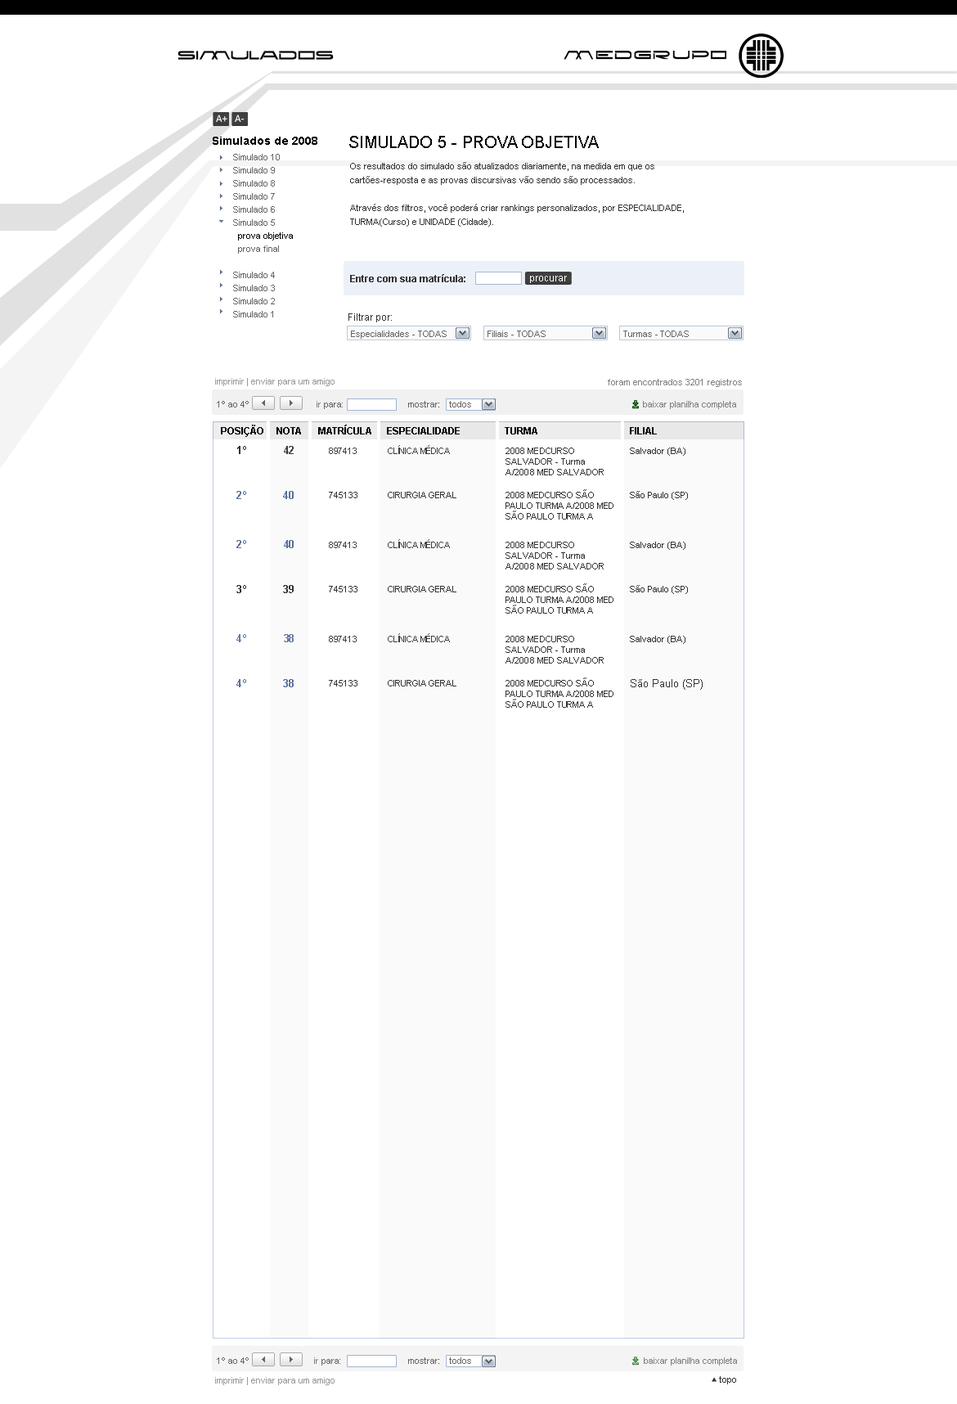
<style>
.page{position:relative;width:957px;height:1404px;background:#ffffff}
.page>*{position:absolute;margin:0}
.t1{font:14.7px "NewBrilliant";color:#000000;font-weight:bold;scale:0.77 1}
.t2{font:10.6px "Calibri";color:#ffffff}
.t3{font:11.5px "Arial-BoldMT";color:#000000}
.t4{font:16.4px "ArialMT";color:#000000}
.t5{font:9px/13.1px "ArialMT";color:#666666}
.t6{font:9px/13.1px "ArialMT";color:#010101}
.t7{font:9px/13.8px "ArialMT";color:#333333}
.t8{font:9.8px "Arial-BoldMT";color:#333333}
.t9{font:9.8px "ArialMT";color:#ffffff}
.t10{font:9.8px "ArialMT";color:#333333}
.t11{font:9px "ArialMT";color:#666666}
.t12{font:9px "ArialMT";color:#999999}
.t13{font:9px "ArialMT";color:#7f7f7f}
.t14{font:9px "ArialMT";color:#333333}
.t15{font:9.8px "Arial-BoldMT";color:#000000}
.t16{font:10.6px "Arial-BoldMT";letter-spacing:-0.02em;color:#333333}
.t17{font:10.6px "Arial-BoldMT";letter-spacing:-0.02em;color:#3e3e3e}
.t18{font:9px "ArialMT";letter-spacing:-0.02em;color:#3e3e3e}
.t19{font:9px/10.6px "ArialMT";color:#333333}
.t20{font:10.6px "Arial-BoldMT";letter-spacing:-0.02em;color:#5b709d}
.t21{font:10.6px "Arial-BoldMT";color:#5b709d}
.t22{font:10.6px "Arial-BoldMT";color:#333333}
.t23{font:10.6px "Arial-BoldMT";letter-spacing:-0.02em;color:#6579a3}
.t24{font:10.6px "ArialMT";color:#333333}
</style>
<div class="page">
<p class="t1" style="left:178px;top:51px;width:156px;height:9px">SIMULADOS</p>
<p class="t2" style="left:216px;top:115px;width:11px;height:7px">A+</p>
<p class="t2" style="left:235px;top:115px;width:9px;height:7px">A-</p>
<p class="t3" style="left:213px;top:137px;width:104px;height:8px">Simulados de 2008</p>
<p class="t4" style="left:349px;top:136px;width:250px;height:12px">SIMULADO 5 - PROVA OBJETIVA</p>
<p class="t5" style="left:233px;top:154px;width:60px;height:163px">Simulado 10<br>Simulado 9<br>Simulado 8<br>Simulado 7<br>Simulado 6<br>Simulado 5<br> <span class="t6"> prova objetiva<br></span>  prova final<br><br>Simulado 4<br>Simulado 3 <br>Simulado 2<br>Simulado 1</p>
<p class="t7" style="left:350px;top:162px;width:334px;height:65px">Os resultados do simulado são atualizados diariamente, na medida em que os <br>cartões-resposta e as provas discursivas vão sendo são processados. <br><br>Através dos filtros, você poderá criar rankings personalizados, por ESPECIALIDADE, <br>TURMA(Curso) e UNIDADE (Cidade).</p>
<p class="t8" style="left:350px;top:274px;width:116px;height:8px">Entre com sua matrícula:</p>
<p class="t9" style="left:530px;top:276px;width:37px;height:7px">procurar</p>
<p class="t10" style="left:349px;top:313px;width:43px;height:9px">Filtrar por:</p>
<p class="t11" style="left:351px;top:331px;width:96px;height:8px">Especialidades - TODAS</p>
<p class="t11" style="left:488px;top:331px;width:58px;height:6px">Filiais - TODAS</p>
<p class="t11" style="left:623px;top:331px;width:66px;height:6px">Turmas - TODAS</p>
<p class="t12" style="left:215px;top:378px;width:120px;height:8px">imprimir | enviar para um amigo</p>
<p class="t13" style="left:608px;top:379px;width:134px;height:8px">foram encontrados 3201 registros</p>
<p class="t11" style="left:217px;top:401px;width:32px;height:6px">1º ao 4º</p>
<p class="t11" style="left:317px;top:401px;width:26px;height:8px"><span class="t13">ir</span> para:</p>
<p class="t11" style="left:408px;top:401px;width:31px;height:6px">mostrar<span class="t14">:</span></p>
<p class="t11" style="left:449px;top:401px;width:22px;height:6px">todos</p>
<p class="t13" style="left:643px;top:401px;width:93px;height:8px">baixar planilha completa</p>
<p class="t15" style="left:221px;top:425px;width:42px;height:12px">POSIÇÃO</p>
<p class="t15" style="left:318px;top:425px;width:53px;height:9px">MATRÍCULA</p>
<p class="t15" style="left:277px;top:427px;width:24px;height:7px">NOTA</p>
<p class="t15" style="left:387px;top:427px;width:73px;height:7px">ESPECIALIDADE</p>
<p class="t15" style="left:505px;top:427px;width:33px;height:7px">TURMA</p>
<p class="t15" style="left:630px;top:427px;width:27px;height:7px">FILIAL</p>
<p class="t16" style="left:237px;top:446px;width:9px;height:8px">1º</p>
<p class="t17" style="left:284px;top:446px;width:10px;height:8px">42</p>
<p class="t18" style="left:329px;top:448px;width:28px;height:6px">897413</p>
<p class="t18" style="left:388px;top:445px;width:62px;height:9px">CLÍNICA MÉDICA</p>
<p class="t19" style="left:506px;top:448px;width:98px;height:27px">2008 MEDCURSO SALVADOR - Turma A/2008 MED SALVADOR</p>
<p class="t14" style="left:630px;top:448px;width:56px;height:8px">Salvador (BA)</p>
<p class="t20" style="left:236px;top:491px;width:10px;height:8px">2º</p>
<p class="t21" style="left:283px;top:491px;width:11px;height:8px">40</p>
<p class="t14" style="left:329px;top:492px;width:29px;height:6px">745133</p>
<p class="t14" style="left:388px;top:492px;width:69px;height:6px">CIRURGIA GERAL</p>
<p class="t19" style="left:506px;top:489px;width:108px;height:31px">2008 MEDCURSO SÃO PAULO TURMA A/2008 MED SÃO PAULO TURMA A</p>
<p class="t14" style="left:630px;top:491px;width:58px;height:9px">São Paulo (SP)</p>
<p class="t20" style="left:236px;top:540px;width:10px;height:8px">2º</p>
<p class="t20" style="left:284px;top:540px;width:10px;height:8px">40</p>
<p class="t18" style="left:329px;top:542px;width:28px;height:6px">897413</p>
<p class="t18" style="left:388px;top:539px;width:62px;height:9px">CLÍNICA MÉDICA</p>
<p class="t19" style="left:506px;top:542px;width:98px;height:27px">2008 MEDCURSO SALVADOR - Turma A/2008 MED SALVADOR</p>
<p class="t14" style="left:630px;top:542px;width:56px;height:8px">Salvador (BA)</p>
<p class="t22" style="left:236px;top:585px;width:10px;height:8px">3º</p>
<p class="t22" style="left:283px;top:585px;width:11px;height:8px">39</p>
<p class="t14" style="left:329px;top:586px;width:29px;height:6px">745133</p>
<p class="t14" style="left:388px;top:586px;width:69px;height:6px">CIRURGIA GERAL</p>
<p class="t19" style="left:506px;top:583px;width:108px;height:31px">2008 MEDCURSO SÃO PAULO TURMA A/2008 MED SÃO PAULO TURMA A</p>
<p class="t14" style="left:630px;top:585px;width:58px;height:9px">São Paulo (SP)</p>
<p class="t23" style="left:236px;top:634px;width:10px;height:8px">4º</p>
<p class="t23" style="left:284px;top:634px;width:10px;height:8px">38</p>
<p class="t18" style="left:329px;top:636px;width:28px;height:6px">897413</p>
<p class="t18" style="left:388px;top:633px;width:62px;height:9px">CLÍNICA MÉDICA</p>
<p class="t19" style="left:506px;top:636px;width:98px;height:28px">2008 MEDCURSO SALVADOR - Turma A/2008 MED SALVADOR</p>
<p class="t14" style="left:630px;top:636px;width:56px;height:8px">Salvador (BA)</p>
<p class="t19" style="left:506px;top:677px;width:108px;height:31px">2008 MEDCURSO SÃO PAULO TURMA A/2008 MED SÃO PAULO TURMA A</p>
<p class="t21" style="left:236px;top:679px;width:10px;height:8px">4º</p>
<p class="t21" style="left:283px;top:679px;width:11px;height:8px">38</p>
<p class="t14" style="left:329px;top:680px;width:29px;height:6px">745133</p>
<p class="t14" style="left:388px;top:680px;width:69px;height:6px">CIRURGIA GERAL</p>
<p class="t24" style="left:631px;top:679px;width:72px;height:11px">São Paulo (SP)</p>
<p class="t11" style="left:217px;top:1357px;width:32px;height:7px">1º ao 4º</p>
<p class="t11" style="left:314px;top:1357px;width:26px;height:9px"><span class="t13">ir</span> para:</p>
<p class="t11" style="left:408px;top:1357px;width:31px;height:7px">mostrar<span class="t14">:</span></p>
<p class="t11" style="left:449px;top:1357px;width:22px;height:7px">todos</p>
<p class="t13" style="left:644px;top:1357px;width:93px;height:9px">baixar planilha completa</p>
<p class="t12" style="left:215px;top:1377px;width:120px;height:8px">imprimir | enviar para um amigo</p>
<p class="t14" style="left:719px;top:1376px;width:17px;height:8px">topo</p>
</div>
